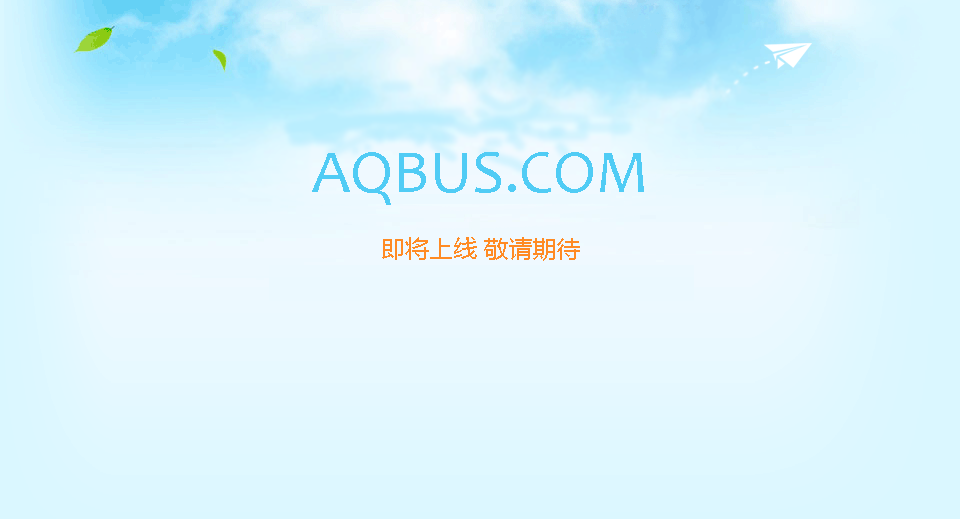
<style>
.page{position:relative;width:960px;height:519px}
.page>*{position:absolute;margin:0}
.t1{font:62px "Candara";color:#50ccf5}
.t2{font:24px "MicrosoftYaHei";color:#ff8b24}
</style>
<div class="page">
<p class="t1" style="left:312px;top:152px;width:332px;height:53px">AQBUS.COM</p>
<p class="t2" style="left:382px;top:237px;width:198px;height:24px">即将上线 敬请期待</p>
</div>
